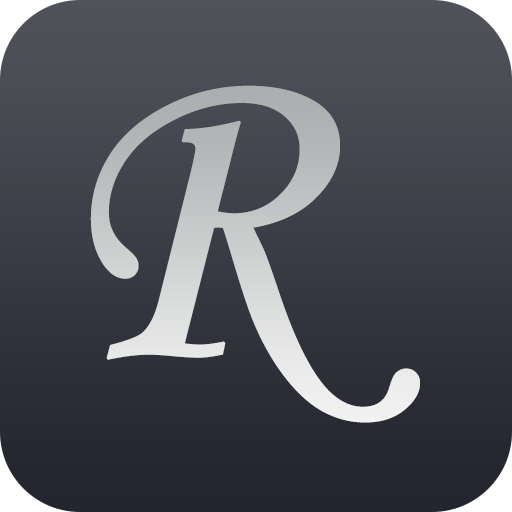
<style>
.page{position:relative;width:512px;height:512px}
.page>*{position:absolute;margin:0}
.t1{font:454.2px "MonotypeCorsiva";letter-spacing:0.02em;font-weight:bold}
</style>
<div class="page">
<p class="t1" style="left:90px;top:85px;width:330px;height:338px">R</p>
</div>
